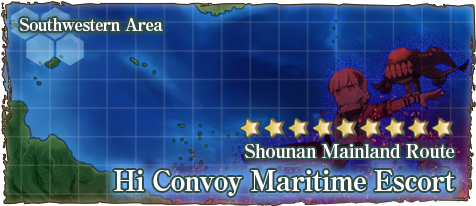
<style>
.page{position:relative;width:476px;height:206px}
.page>*{position:absolute;margin:0}
.t1{font:17px "RyuminPro-ExBold";letter-spacing:-0.04em;color:#ffffff}
.t2{font:19px "RyuminPro-ExBold";letter-spacing:-0.04em;color:#ffffff}
.t3{font:28px "RyuminPro-ExBold";letter-spacing:-0.04em;color:#ffffff}
</style>
<div class="page">
<p class="t1" style="left:19px;top:18px;width:144px;height:14px">Southwestern Area</p>
<p class="t2" style="left:245px;top:143px;width:210px;height:15px">Shounan Mainland Route</p>
<p class="t3" style="left:114px;top:170px;width:341px;height:26px">Hi Convoy Maritime Escort</p>
</div>
